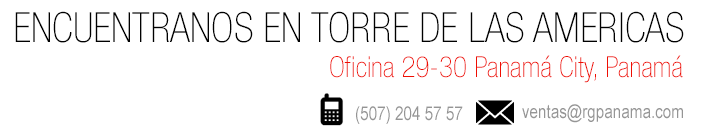
<style>
.page{position:relative;width:706px;height:136px;background:#ffffff}
.page>*{position:absolute;margin:0}
.t1{font:41.6px "HelveticaNeueLTPro-ThCn";color:#000000;text-transform:uppercase}
.t2{font:29.2px "HelveticaNeueLTPro-ThCn";color:#ef0e03}
.t3{font:18.9px "ArialNarrow";color:#959595}
</style>
<div class="page">
<p class="t1" style="left:15px;top:11px;width:669px;height:32px">encuentranos en torre de las americas</p>
<p class="t2" style="left:330px;top:55px;width:353px;height:28px">Oficina 29-30 Panamá City, Panamá</p>
<p class="t3" style="left:356px;top:106px;width:107px;height:18px">(507) 204 57 57</p>
<p class="t3" style="left:522px;top:104px;width:161px;height:19px">ventas@rgpanama.com</p>
</div>
